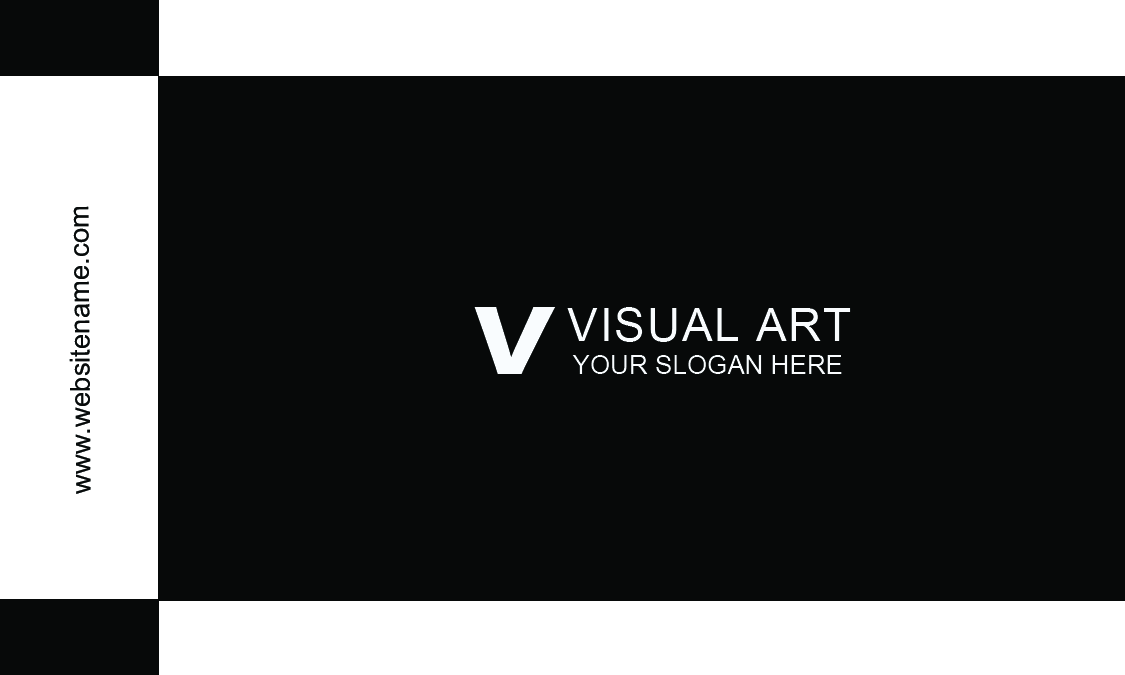
<style>
.page{position:relative;width:1125px;height:675px;background:#070909}
.page>*{position:absolute;margin:0}
.t1{font:27.5px "ArialMT";color:#080b0b}
.t2{font:100px "ErasITC-Bold";color:#f9fcfe}
.t3{font:45.8px "ArialMT";letter-spacing:0.04em;color:#f9fcfe}
.t4{font:26px "ArialMT";color:#f9fcfe}
</style>
<div class="page">
<p class="t1" style="left:69px;top:206px;width:22px;height:288px;rotate:-90deg">www.websitename.com</p>
<p class="t2" style="left:474px;top:307px;width:82px;height:67px">V</p>
<p class="t3" style="left:567px;top:307px;width:284px;height:35px">VISUAL ART</p>
<p class="t4" style="left:572px;top:355px;width:270px;height:19px">YOUR SLOGAN HERE</p>
</div>
